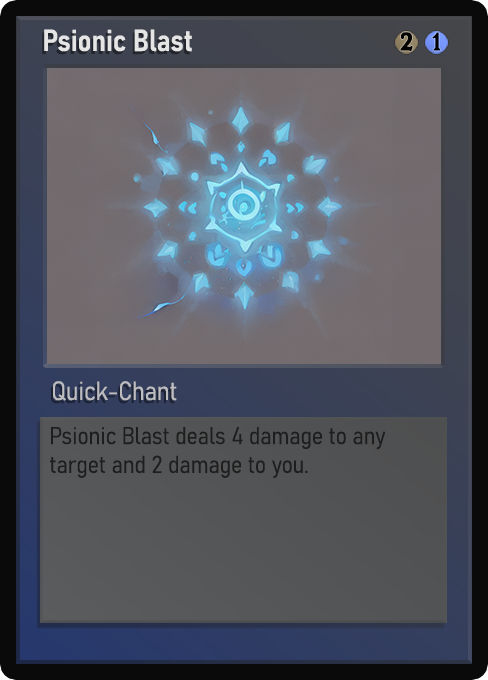
<style>
.page{position:relative;width:488px;height:680px}
.page>*{position:absolute;margin:0}
.t1{font:30px "Bahnschrift-SemiBoldSemiCondensed";color:#f2f2f2;font-weight:bold}
.t2{font:25px "WTRRoycroft";color:#000000;font-weight:bold;scale:1.09 1}
.t3{font:26px "Bahnschrift-LightSemiCondensed";color:#c8c8c8;font-weight:bold}
.t4{font:24px "Bahnschrift-LightSemiCondensed";color:#1e1e1e;font-weight:bold}
</style>
<div class="page">
<p class="t1" style="left:44px;top:29px;width:148px;height:23px;opacity:0.9">Psionic Blast</p>
<p class="t2" style="left:400px;top:32px;width:13px;height:19px">2</p>
<p class="t2" style="left:432px;top:32px;width:9px;height:19px">1</p>
<p class="t3" style="left:53px;top:381px;width:124px;height:20px;opacity:0.9">Quick-Chant</p>
<p class="t4" style="left:50px;top:427px;width:336px;height:51px">Psionic Blast deals 4 damage to any target and 2 damage to you.</p>
</div>
